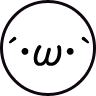
<style>
.page{position:relative;width:96px;height:96px;background:#ffffff}
.page>*{position:absolute;margin:0}
.t1{font:36px "HiraMaruPro-W4";color:#000000}
</style>
<div class="page">
<p class="t1" style="left:9px;top:36px;width:80px;height:30px">´・ω・｀</p>
</div>
